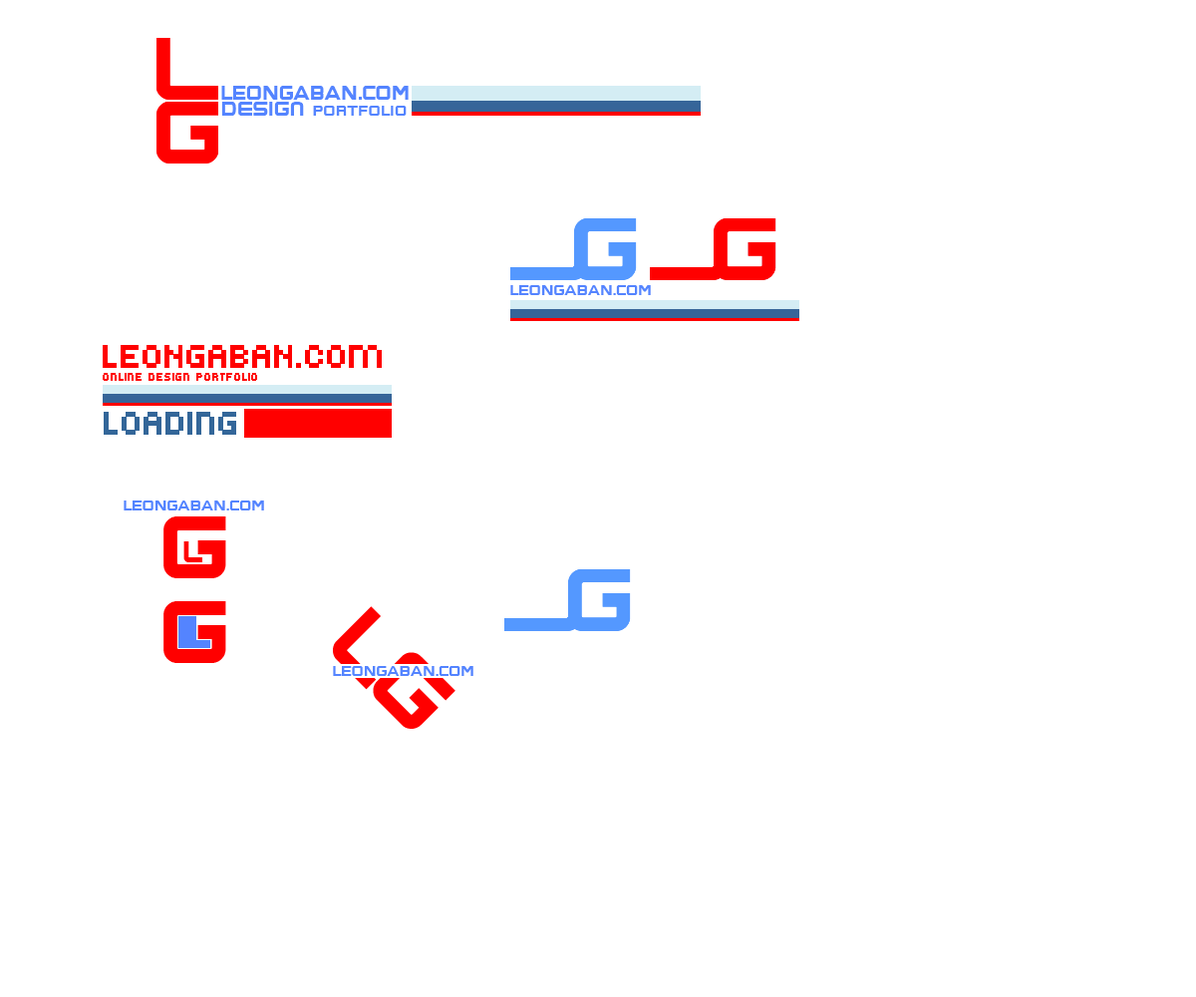
<style>
.page{position:relative;width:1196px;height:997px;background:#ffffff}
.page>*{position:absolute;margin:0}
.t1{font:15.9px "BoomBox";letter-spacing:0.05em;color:#5484ff}
.t2{font:12px "BoomBox";letter-spacing:0.08em;color:#5484ff}
.t3{font:12px "BoomBox";letter-spacing:0.05em;color:#5484ff}
.t4{font:35.9px "Kroeger0555";color:#ff0000}
.t5{font:12px "Kroeger0555";color:#ff0000}
.t6{font:35.9px "Kroeger0555";color:#336699}
.t7{font:71.8px "BoomBox";letter-spacing:0.05em;color:#ff0000}
.t8{font:23.9px "BoomBox";letter-spacing:0.05em;color:#ff0000}
</style>
<div class="page">
<p class="t1" style="left:221px;top:86px;width:188px;height:14px">leongaban.com</p>
<p class="t2" style="left:221px;top:102px;width:186px;height:14px"><span class="t1">DESIGN </span>portfolio</p>
<p class="t3" style="left:510px;top:285px;width:141px;height:10px">leongaban.com</p>
<p class="t4" style="left:103px;top:345px;width:279px;height:23px">LEONGABAN.com</p>
<p class="t5" style="left:103px;top:373px;width:154px;height:8px">Online Design Portfolio</p>
<p class="t6" style="left:104px;top:412px;width:132px;height:23px">Loading</p>
<p class="t3" style="left:124px;top:500px;width:140px;height:10px">leongaban.com</p>
<p class="t7" style="left:163px;top:516px;width:63px;height:62px">G</p>
<p class="t8" style="left:183px;top:541px;width:19px;height:21px">L</p>
<p class="t7" style="left:163px;top:601px;width:63px;height:62px">G</p>
<p class="t7" style="left:333px;top:606px;width:123px;height:123px;rotate:45deg">LG</p>
<p class="t3" style="left:333px;top:666px;width:140px;height:10px">leongaban.com</p>
</div>
